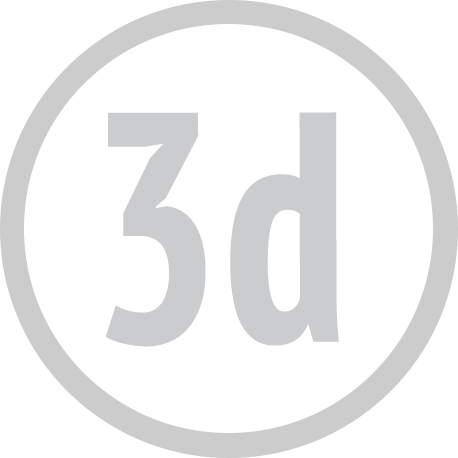
<style>
.page{position:relative;width:458px;height:458px;background:#ffffff}
.page>*{position:absolute;margin:0}
.t1{font:327px "PTSansPro-CondBold";color:#cbccce}
</style>
<div class="page">
<p class="t1" style="left:105px;top:112px;width:234px;height:235px">3d</p>
</div>
